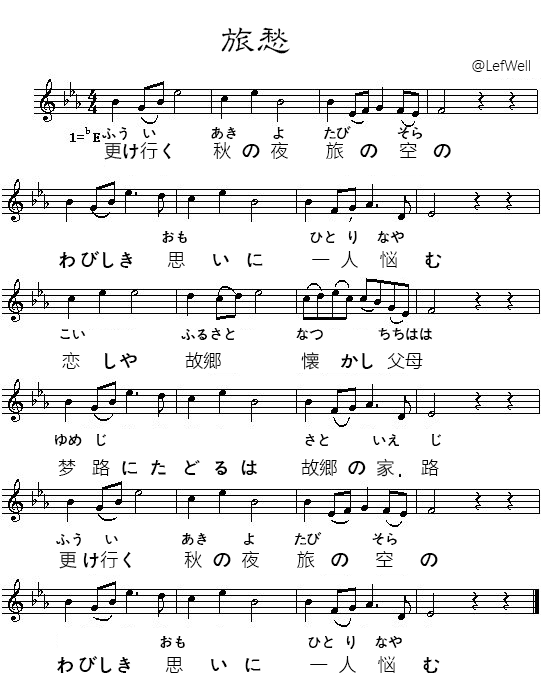
<style>
.page{position:relative;width:541px;height:692px;background:#ffffff}
.page>*{position:absolute;margin:0}
.t1{font:36px "JXiaoLiSu";color:#000000}
.t2{font:14px "MicrosoftYaHeiLight";color:#010101}
.t3{font:14px "MicrosoftYaHeiLight";color:#000000}
.t4{font:18px "MicrosoftYaHeiLight";color:#000000}
</style>
<div class="page">
<p class="t1" style="left:221px;top:27px;width:69px;height:27px">旅愁</p>
<p class="t2" style="left:472px;top:60px;width:58px;height:12px">@LefWell</p>
<p class="t3" style="left:102px;top:126px;width:320px;height:14px">ふう   い             あき        よ         たび           そら</p>
<p class="t4" style="left:104px;top:142px;width:347px;height:18px">更け行く       秋  の  夜       旅   の    空   の</p>
<p class="t3" style="left:162px;top:231px;width:242px;height:13px">おも                             ひと  り    なや</p>
<p class="t4" style="left:59px;top:251px;width:383px;height:17px">わ びしき      思     い   に         一  人    悩     む</p>
<p class="t3" style="left:60px;top:328px;width:373px;height:12px">こい                       ふるさと              なつ             ちちはは</p>
<p class="t4" style="left:62px;top:352px;width:361px;height:18px">恋    しや         故郷               懐    かし  父母</p>
<p class="t3" style="left:55px;top:434px;width:386px;height:12px">ゆめ   じ                                               さと          いえ       じ</p>
<p class="t4" style="left:58px;top:458px;width:381px;height:19px">梦   路  に  た   ど  る  は        故郷  の  家     路</p>
<p class="t3" style="left:56px;top:532px;width:341px;height:14px">ふう     い               あき        よ         たび            そら</p>
<p class="t4" style="left:59px;top:551px;width:379px;height:18px">更 け行く         秋  の  夜       旅   の     空     の</p>
<p class="t3" style="left:160px;top:636px;width:242px;height:13px">おも                             ひと  り    なや</p>
<p class="t4" style="left:57px;top:656px;width:383px;height:17px">わ びしき      思     い   に         一  人    悩     む</p>
</div>
